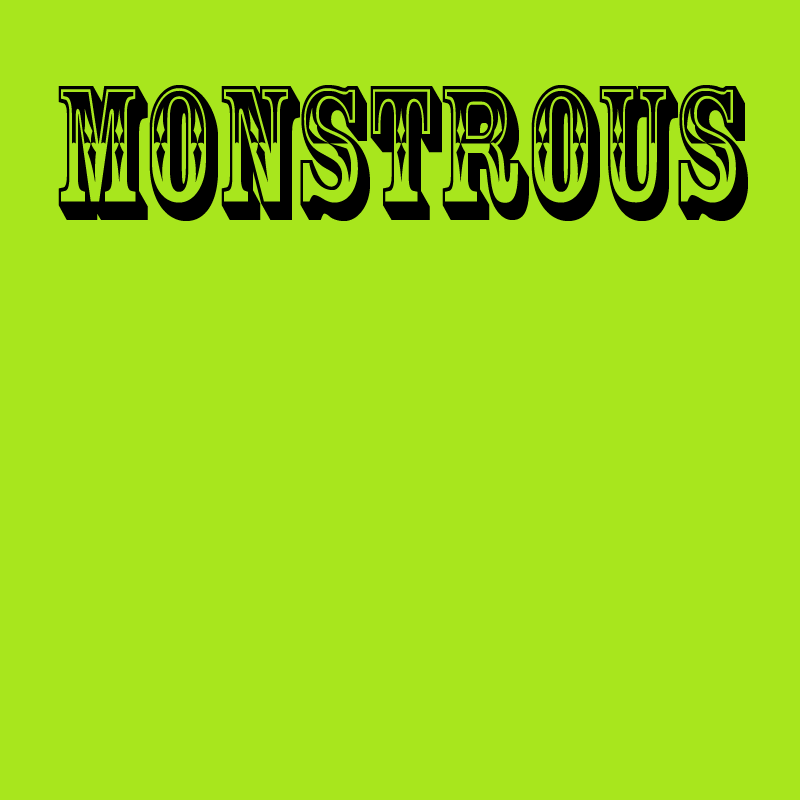
<style>
.page{position:relative;width:802px;height:802px;background:#a8e61d}
.page>*{position:absolute;margin:0}
.t1{font:179.4px "RosewoodStd-Regular";color:#000000;scale:0.73 1}
</style>
<div class="page">
<p class="t1" style="left:58px;top:85px;width:690px;height:136px">MONSTROUS</p>
</div>
